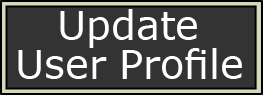
<style>
.page{position:relative;width:263px;height:95px;background:#333333}
.page>*{position:absolute;margin:0}
.t1{font:39.9px "Verdana";color:#ffffff}
</style>
<div class="page">
<p class="t1" style="left:60px;top:9px;width:137px;height:39px">Update</p>
<p class="t1" style="left:18px;top:48px;width:224px;height:31px">User Profile</p>
</div>
